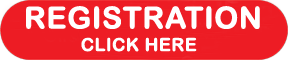
<style>
.page{position:relative;width:288px;height:60px;background:#ed1c24}
.page>*{position:absolute;margin:0}
.t1{font:30px "ArialRoundedMTBold";color:#ffffff;text-transform:uppercase;font-weight:bold}
.t2{font:18px "ArialRoundedMTBold";color:#ffffff;text-transform:uppercase;font-weight:bold}
</style>
<div class="page">
<p class="t1" style="left:26px;top:6px;width:234px;height:23px">REGISTRATION</p>
<p class="t2" style="left:81px;top:37px;width:116px;height:15px">CLICK HERE</p>
</div>
